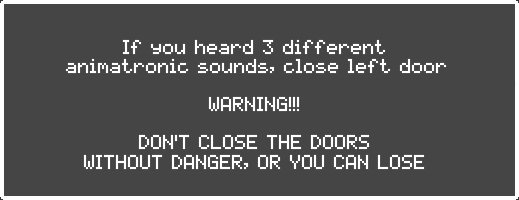
<style>
.page{position:relative;width:519px;height:200px;background:#454545}
.page>*{position:absolute;margin:0}
.t1{font:16px "Five-Nights-at-Freddy's";color:#ffffff}
</style>
<div class="page">
<p class="t1" style="left:65px;top:39px;width:382px;height:131px;text-align:center">If  you  heard  3  different<br> animatronic  sounds,  close  left  door<br><br>WARNING!!!<br><br>DON'T  CLOSE  THE  DOORS<br>WITHOUT  DANGER,  OR  YOU  CAN  LOSE</p>
</div>
